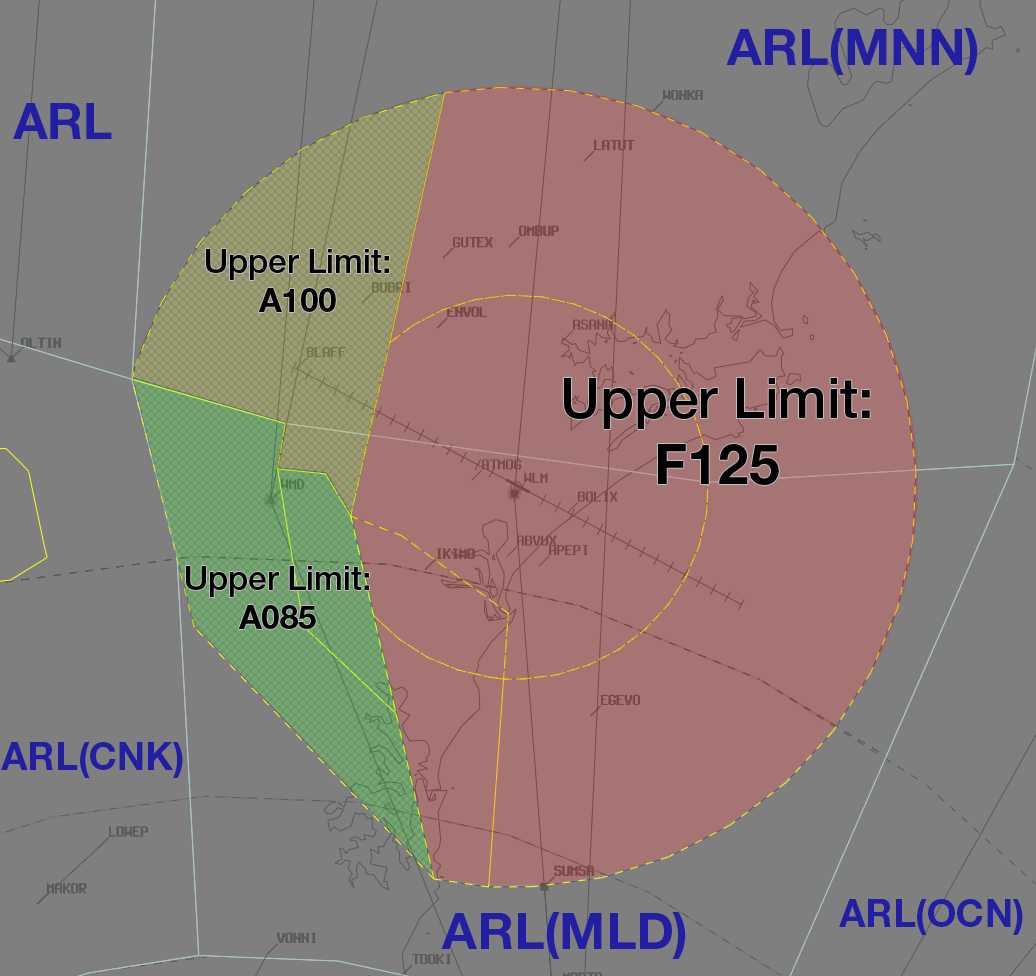
<style>
.page{position:relative;width:1036px;height:976px;background:#7f7f7f}
.page>*{position:absolute;margin:0}
.t1{font:50.9px "HelveticaNeueLTStd-Bd";color:#221fa2}
.t2{font:50.1px "HelveticaNeueLTStd-Bd";color:#221fa2}
.t3{font:33.1px "HelveticaNeueLTStd-Md";color:#000000}
.t4{font:33.1px "HelveticaNeueLTStd-Bd";color:#000000}
.t5{font:55.4px "HelveticaNeueLTStd-Md";color:#000000}
.t6{font:55.4px "HelveticaNeueLTStd-Bd";color:#000000}
.t7{font:38.1px "HelveticaNeueLTStd-Bd";color:#221fa2}
</style>
<div class="page">
<p class="t1" style="left:726px;top:28px;width:252px;height:47px">ARL(MNN)</p>
<p class="t2" style="left:13px;top:103px;width:99px;height:36px">ARL</p>
<p class="t3" style="left:206px;top:249px;width:183px;height:63px;text-align:center">Upper Limit:<span class="t4"><br>A100</span></p>
<p class="t5" style="left:564px;top:378px;width:306px;height:107px;text-align:center">Upper Limit:<span class="t6"><br>F125</span></p>
<p class="t3" style="left:186px;top:566px;width:183px;height:63px;text-align:center">Upper Limit:<span class="t4"><br>A085</span></p>
<p class="t7" style="left:1px;top:742px;width:182px;height:36px">ARL(CNK)</p>
<p class="t7" style="left:839px;top:899px;width:184px;height:36px">ARL(OCN)</p>
<p class="t1" style="left:441px;top:912px;width:245px;height:47px">ARL(MLD)</p>
</div>
